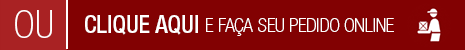
<style>
.page{position:relative;width:465px;height:50px;background:#820102}
.page>*{position:absolute;margin:0}
.t1{font:38.1px "HelveticaNeueLTStd-ThCn";color:#ffffff}
.t2{font:24.4px "HelveticaNeueLTStd-MdCn";color:#ffffff}
.t3{font:19.4px "HelveticaNeueLTStd-ThCn";color:#ffffff}
</style>
<div class="page">
<p class="t1" style="left:15px;top:10px;width:37px;height:28px">OU</p>
<p class="t2" style="left:85px;top:15px;width:113px;height:20px">CLIQUE AQUI</p>
<p class="t3" style="left:206px;top:18px;width:188px;height:18px">E FAÇA SEU PEDIDO ONLINE</p>
</div>
